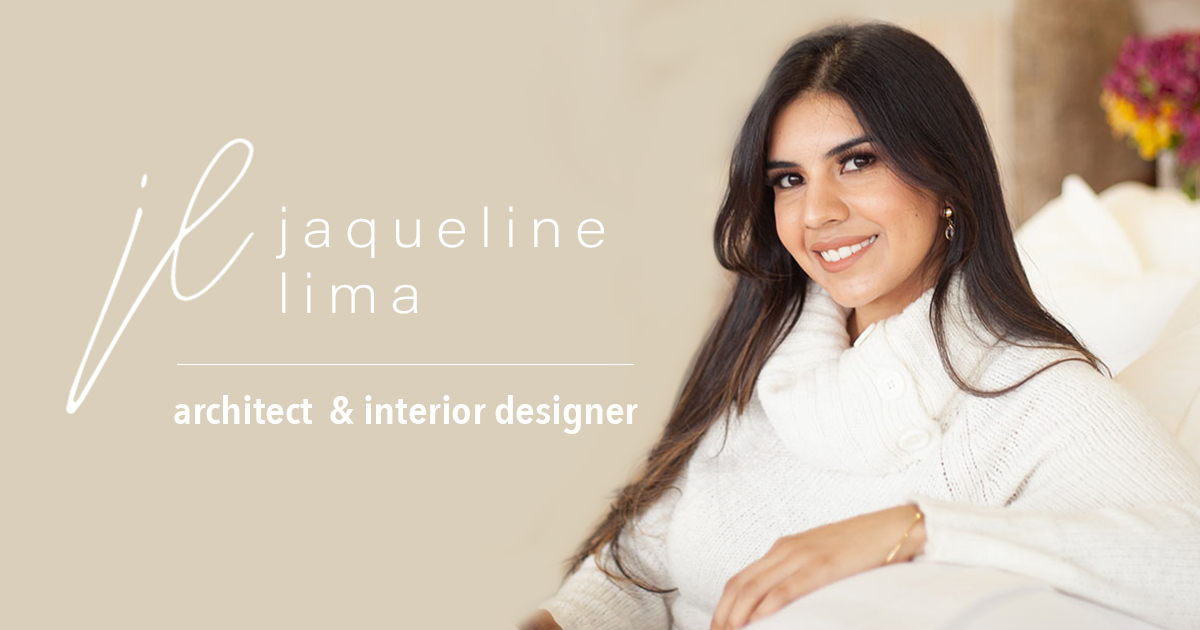
<style>
.page{position:relative;width:1200px;height:630px;background:#dacfba}
.page>*{position:absolute;margin:0}
.t1{font:55px "AcuminConcept-ExtraLight";letter-spacing:0.18em;color:#ffffff;scale:1.14 1}
.t2{font:40px "AvenirNextCondensed-DemiBold";color:#ffffff;scale:1.09 1}
</style>
<div class="page">
<p class="t1" style="left:276px;top:206px;width:328px;height:108px">jaqueline <br>lima</p>
<p class="t2" style="left:174px;top:395px;width:464px;height:39px">architect  &amp; interior designer</p>
</div>
